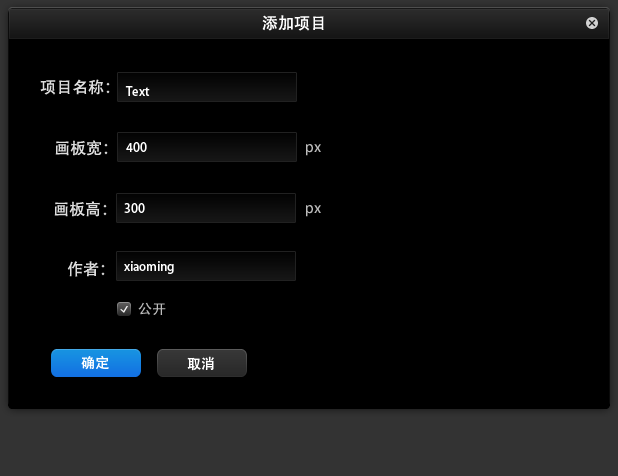
<style>
.page{position:relative;width:618px;height:476px;background:#000000}
.page>*{position:absolute;margin:0}
.t1{font:16px "AdobeHeitiStd-Regular";color:#ffffff}
.t2{font:16px "AdobeHeitiStd-Regular";color:#dddddd}
.t3{font:12px "AdobeHeitiStd-Regular";color:#ffffff}
.t4{font:14px "AdobeHeitiStd-Regular";color:#bcbcbc}
.t5{font:14px "AdobeHeitiStd-Regular";color:#ffffff}
</style>
<div class="page">
<p class="t1" style="left:262px;top:15px;width:62px;height:16px">添加项目</p>
<p class="t2" style="left:40px;top:79px;width:70px;height:16px">项目名称：</p>
<p class="t3" style="left:125px;top:86px;width:25px;height:10px">Text</p>
<p class="t2" style="left:55px;top:140px;width:53px;height:16px">画板宽：</p>
<p class="t3" style="left:126px;top:142px;width:21px;height:10px">400</p>
<p class="t4" style="left:306px;top:144px;width:15px;height:12px">px</p>
<p class="t2" style="left:54px;top:201px;width:53px;height:16px">画板高：</p>
<p class="t3" style="left:124px;top:203px;width:21px;height:10px">300</p>
<p class="t4" style="left:306px;top:205px;width:15px;height:12px">px</p>
<p class="t2" style="left:67px;top:261px;width:38px;height:16px">作者：</p>
<p class="t3" style="left:124px;top:261px;width:50px;height:13px">xiaoming</p>
<p class="t4" style="left:138px;top:302px;width:28px;height:13px">公开</p>
<p class="t5" style="left:81px;top:355px;width:28px;height:15px">确定</p>
<p class="t5" style="left:187px;top:356px;width:27px;height:15px">取消</p>
</div>
